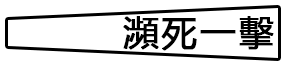
<style>
.page{position:relative;width:286px;height:66px;background:#ffffff}
.page>*{position:absolute;margin:0}
.t1{font:35px "MicrosoftYaHei";letter-spacing:0.06em;color:#000000;font-weight:bold}
</style>
<div class="page">
<p class="t1" style="left:123px;top:16px;width:151px;height:35px">瀕死一擊</p>
</div>
